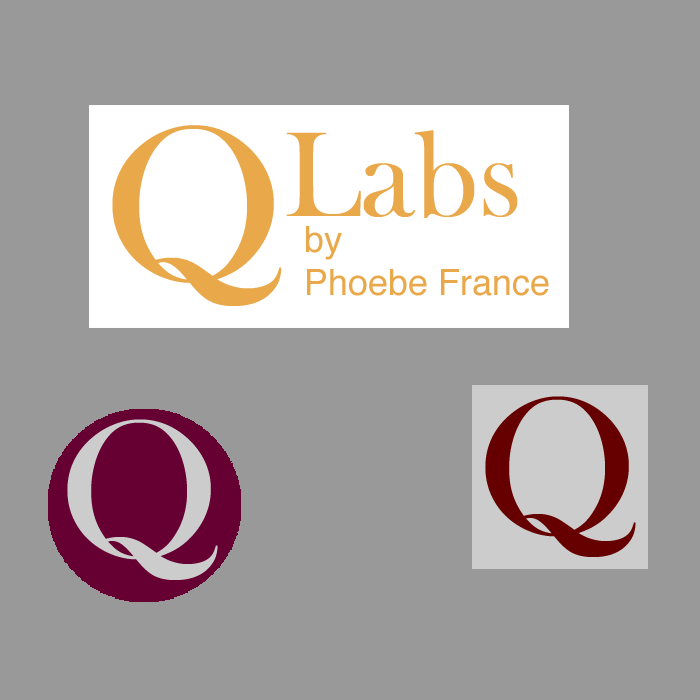
<style>
.page{position:relative;width:700px;height:700px;background:#999999}
.page>*{position:absolute;margin:0}
.t1{font:225px "BaskOldFace";color:#e9a84a}
.t2{font:125px "BaskOldFace";color:#e9a84a}
.t3{font:36px "Helvetica";color:#e9a84a}
.t4{font:200px "BaskOldFace";color:#660000}
.t5{font:200px "BaskOldFace";color:#cccccc}
</style>
<div class="page">
<p class="t1" style="left:112px;top:125px;width:170px;height:181px">Q</p>
<p class="t2" style="left:286px;top:130px;width:232px;height:88px">Labs</p>
<p class="t3" style="left:306px;top:226px;width:243px;height:70px">by <br>Phoebe France</p>
<p class="t4" style="left:485px;top:396px;width:151px;height:161px">Q</p>
<p class="t5" style="left:67px;top:419px;width:151px;height:161px">Q</p>
</div>
